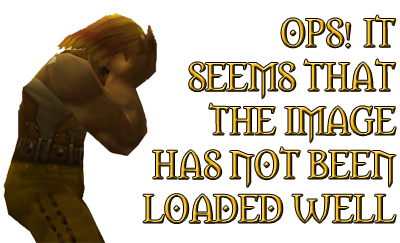
<style>
.page{position:relative;width:400px;height:243px;background:#ffffff}
.page>*{position:absolute;margin:0}
.t1{font:36.6px "Morpheus"}
</style>
<div class="page">
<p class="t1" style="left:143px;top:15px;width:253px;height:208px;text-align:right">OPS! IT<br>SEEMS THAT<br>THE IMAGE<br>HAS NOT BEEN<br>LOADED WELL</p>
</div>
